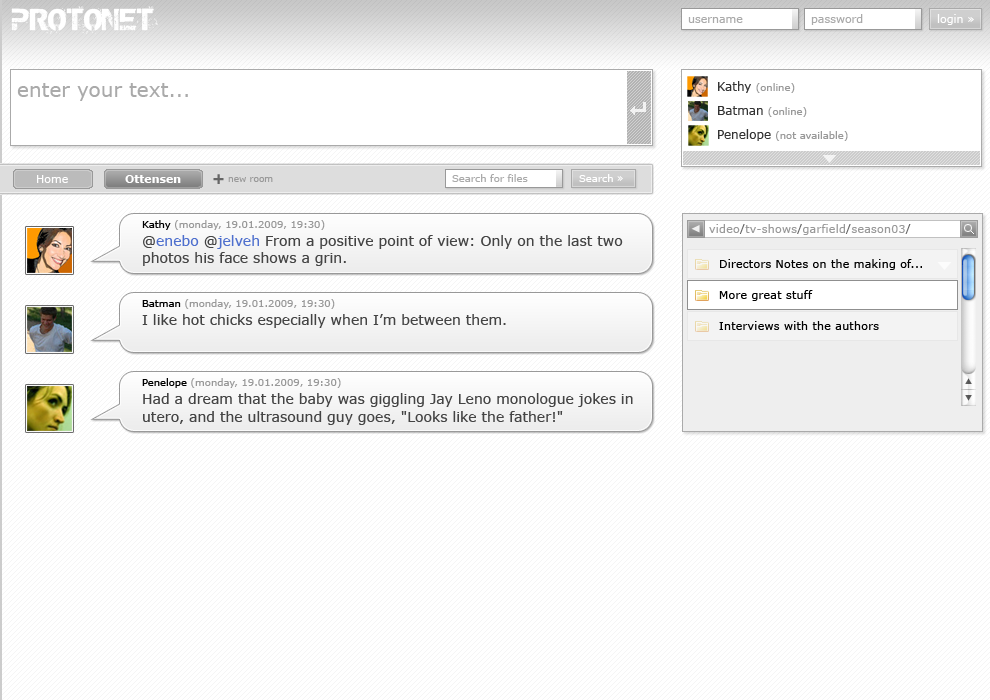
<style>
.page{position:relative;width:990px;height:700px;background:#ffffff}
.page>*{position:absolute;margin:0}
.t1{font:36px "AnthologY";color:#ffffff}
.t2{font:11px "Verdana";color:#aaaaaa}
.t3{font:11px "Verdana";color:#ffffff}
.t4{font:20px "Verdana";color:#aaaaaa}
.t5{font:10px "Verdana";color:#999999}
.t6{font:12px "Verdana";color:#333333}
.t7{font:15px "Verdana-Bold";color:#666666}
.t8{font:10px "Verdana";color:#aaaaaa}
.t9{font:10px "Verdana";color:#ffffff}
.t10{font:11px "Verdana-Bold";color:#ffffff}
.t11{font:9px "Verdana";color:#999999}
.t12{font:14px/18px "Verdana";color:#444444}
.t13{font:10px "Verdana";color:#000000}
.t14{font:14px/18px "Verdana";color:#4e6fce}
.t15{font:14px/18px "Verdana";color:#4f70ce}
.t16{font:14px "Verdana";color:#444444}
.t17{font:11px "Verdana";letter-spacing:0.025em;color:#999999}
.t18{font:11px "Verdana";letter-spacing:0.025em;color:#666666}
.t19{font:11px "Verdana";letter-spacing:0.025em;color:#000000}
</style>
<div class="page">
<p class="t1" style="left:11px;top:6px;width:147px;height:28px">PROTONET</p>
<p class="t2" style="left:688px;top:17px;width:55px;height:6px">username</p>
<p class="t2" style="left:811px;top:14px;width:52px;height:11px">password</p>
<p class="t3" style="left:937px;top:14px;width:37px;height:11px">login »</p>
<p class="t4" style="left:17px;top:83px;width:171px;height:18px">enter your text...</p>
<p class="t5" style="left:718px;top:81px;width:77px;height:12px"><span class="t6">Kathy </span>(online)</p>
<p class="t5" style="left:718px;top:106px;width:89px;height:11px"><span class="t6">Batman </span>(online)</p>
<p class="t5" style="left:718px;top:129px;width:130px;height:12px"><span class="t6">Penelope </span>(not available)</p>
<p class="t7" style="left:213px;top:174px;width:11px;height:10px">+</p>
<p class="t8" style="left:452px;top:174px;width:76px;height:8px">Search for files</p>
<p class="t9" style="left:579px;top:174px;width:44px;height:8px">Search »</p>
<p class="t3" style="left:37px;top:175px;width:31px;height:8px">Home</p>
<p class="t10" style="left:125px;top:175px;width:56px;height:8px">Ottensen</p>
<p class="t11" style="left:228px;top:177px;width:45px;height:5px">new room</p>
<p class="t12" style="left:142px;top:220px;width:481px;height:46px"><span class="t13">Kathy</span><span class="t5"> (monday, 19.01.2009, 19:30)<br></span>@<span class="t14">enebo</span> @<span class="t15">jelveh</span> From a positive point of view: Only on the last two<br><span class="t16">photos his face shows a grin.</span></p>
<p class="t17" style="left:709px;top:224px;width:202px;height:11px">video<span class="t18">/</span>tv-shows<span class="t18">/</span>garfield<span class="t18">/</span>season03<span class="t18">/</span></p>
<p class="t19" style="left:720px;top:259px;width:202px;height:11px">Directors Notes on the making of...</p>
<p class="t19" style="left:719px;top:290px;width:94px;height:11px">More great stuff</p>
<p class="t12" style="left:142px;top:299px;width:364px;height:29px"><span class="t13">Batman</span><span class="t5"> (monday, 19.01.2009, 19:30)<br></span>I like hot chicks especially when I’m between them.</p>
<p class="t19" style="left:719px;top:321px;width:160px;height:9px">Interviews with the authors</p>
<p class="t12" style="left:142px;top:378px;width:491px;height:47px"><span class="t13">Penelope</span><span class="t5"> (monday, 19.01.2009, 19:30)<br></span>Had a dream that the baby was giggling Jay Leno monologue jokes in<br>utero, and the ultrasound guy goes, "Looks like the father!"</p>
</div>
